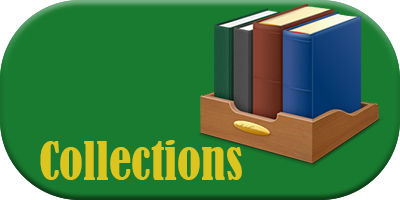
<style>
.page{position:relative;width:400px;height:200px;background:#197b30}
.page>*{position:absolute;margin:0}
.t1{font:50px "BernardMT-Condensed";color:#ddc520}
</style>
<div class="page">
<p class="t1" style="left:40px;top:140px;width:202px;height:40px">Collections</p>
</div>
